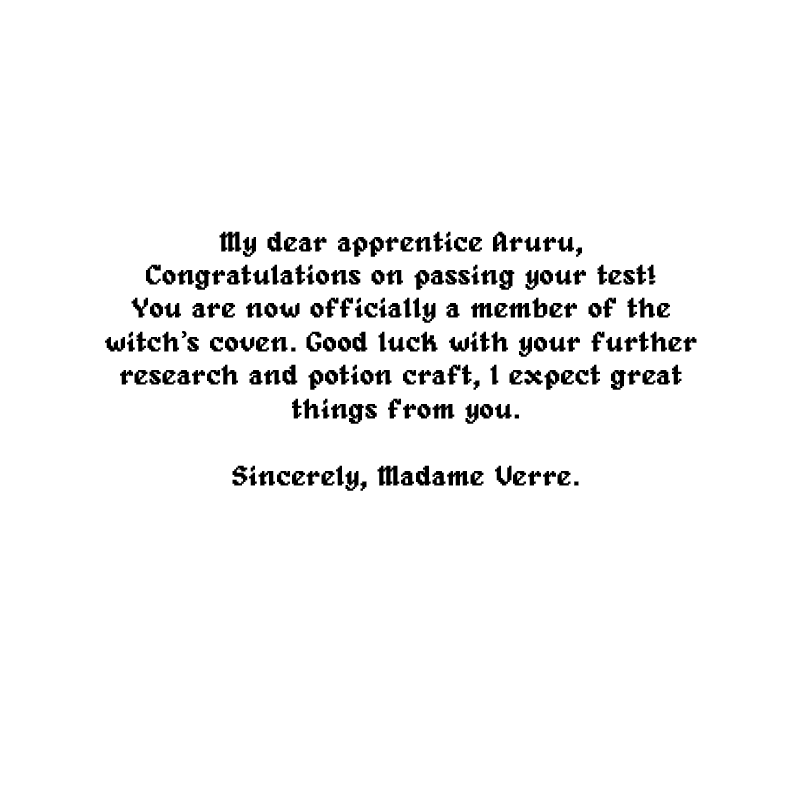
<style>
.page{position:relative;width:800px;height:800px;background:#ffffff}
.page>*{position:absolute;margin:0}
.t1{font:27.9px "Alagard";color:#000000;font-weight:bold}
.t2{font:27.9px "MinionPro-Regular";color:#000000;font-weight:bold}
</style>
<div class="page">
<p class="t1" style="left:105px;top:231px;width:592px;height:260px;text-align:center">My dear apprentice Aruru, <br>Congratulations on passing your test! <br>You are now officially a member of the <br>witch<span class="t2">’</span>s coven. Good luck with your further <br>research and potion craft, I expect great <br>things from you.<br><br>Sincerely, Madame Verre.</p>
</div>
